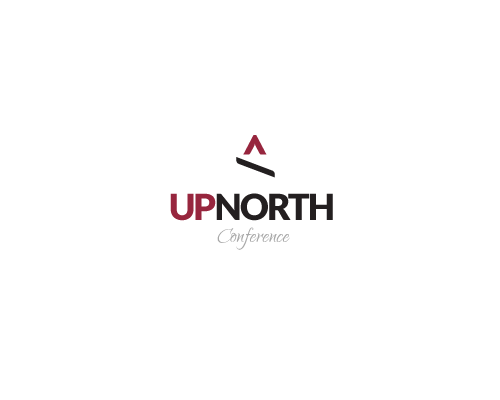
<style>
.page{position:relative;width:500px;height:400px;background:#ffffff}
.page>*{position:absolute;margin:0}
.t1{font:48px "Lato-Black";letter-spacing:-0.05em;color:#97263e}
.t2{font:48px "Lato-Black";letter-spacing:-0.05em;color:#231f20}
.t3{font:36px "Lato-Black";letter-spacing:-0.05em;color:#231f20}
.t4{font:36px "Lato-Black";letter-spacing:-0.05em;color:#97263e}
.t5{font:26px "Qwigley-Regular";color:#a8a8a8}
</style>
<div class="page">
<p class="t1" style="left:236px;top:135px;width:39px;height:43px;rotate:90deg">&lt;<span class="t2">/</span></p>
<p class="t3" style="left:170px;top:193px;width:163px;height:28px"><span class="t4">UP</span>NORTH</p>
<p class="t5" style="left:217px;top:227px;width:73px;height:23px">Conference</p>
</div>
